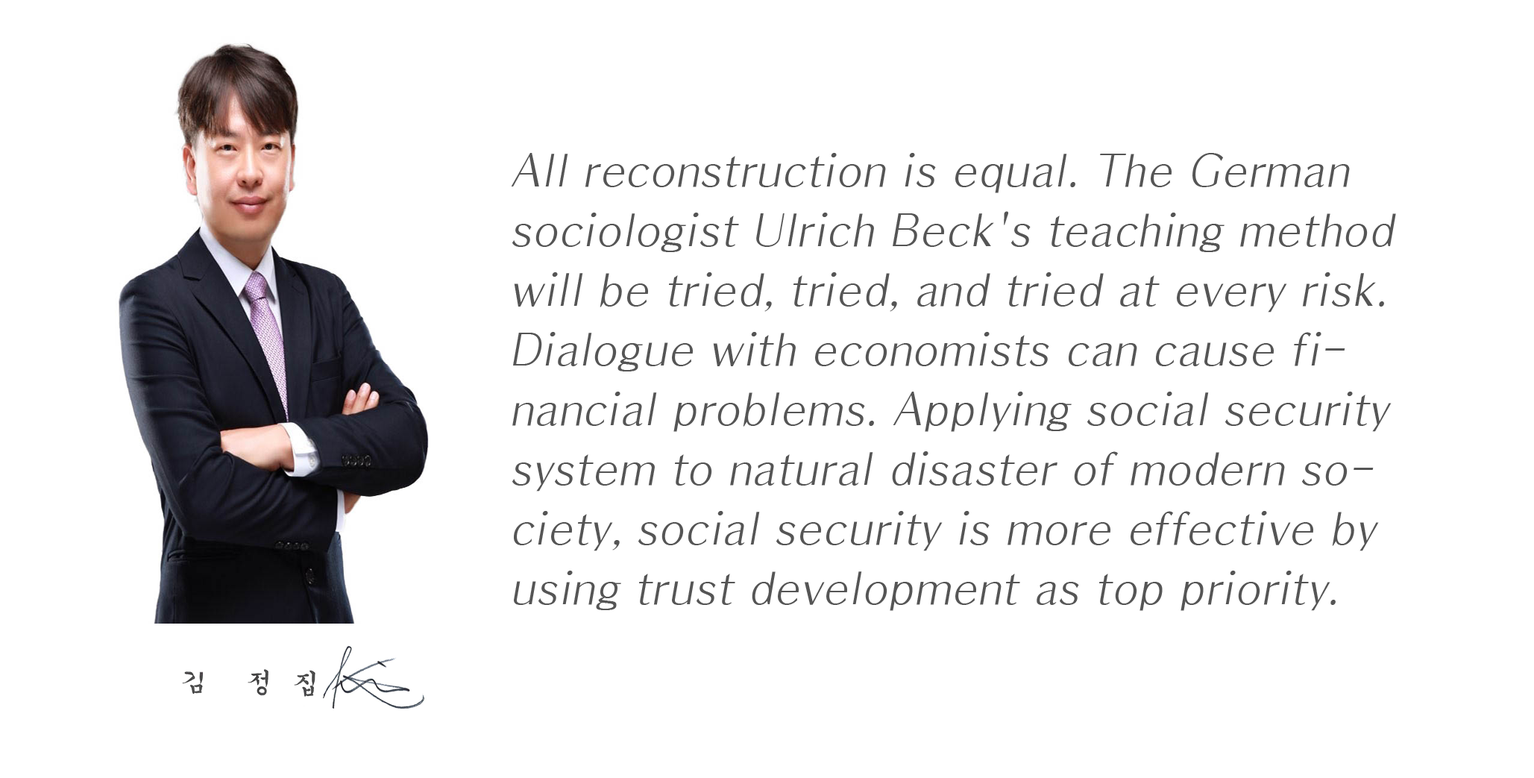
<style>
.page{position:relative;width:1534px;height:778px;background:#ffffff}
.page>*{position:absolute;margin:0}
.t1{font:44.7px/59.6px "H2gprM";color:#555555;font-style:italic}
</style>
<div class="page">
<p class="t1" style="left:511px;top:153px;width:885px;height:458px">All reconstruction is equal. The German sociologist Ulrich Beck's teaching method will be tried, tried, and tried at every risk. Dialogue with economists can cause financial problems. Applying social security system to natural disaster of modern society, social security is more effective by using trust development as top priority.</p>
</div>
